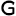
<style>
.page{position:relative;width:16px;height:16px;background:#ffffff}
.page>*{position:absolute;margin:0}
.t1{font:20.2px "MontserratRoman-Medium";color:#000000}
</style>
<div class="page">
<p class="t1" style="left:1px;top:0px;width:14px;height:16px">G</p>
</div>
